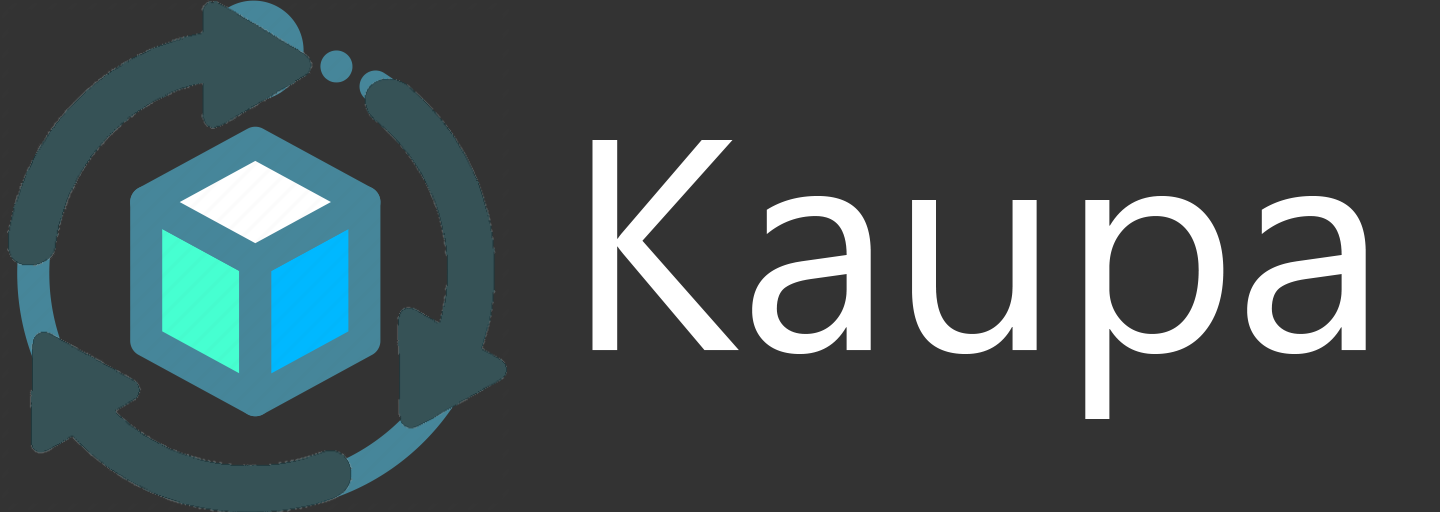
<style>
.page{position:relative;width:1440px;height:512px;background:#333333}
.page>*{position:absolute;margin:0}
.t1{font:300px "SegoeUIHistoric";color:#ffffff}
</style>
<div class="page">
<p class="t1" style="left:592px;top:140px;width:774px;height:279px">Kaupa</p>
</div>
